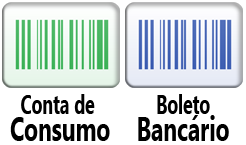
<style>
.page{position:relative;width:246px;height:145px;background:#ffffff}
.page>*{position:absolute;margin:0}
.t1{font:26.8px "NirmalaUI-Bold";color:#000000;scale:0.66 1}
.t2{font:34.5px "NirmalaUI-Bold";color:#000000;scale:0.66 1}
</style>
<div class="page">
<p class="t1" style="left:10px;top:94px;width:100px;height:47px;text-align:center">Conta de <br><span class="t2">Consumo</span></p>
<p class="t2" style="left:138px;top:94px;width:91px;height:47px;text-align:center"><span class="t1">Boleto<br></span>Bancário</p>
</div>
